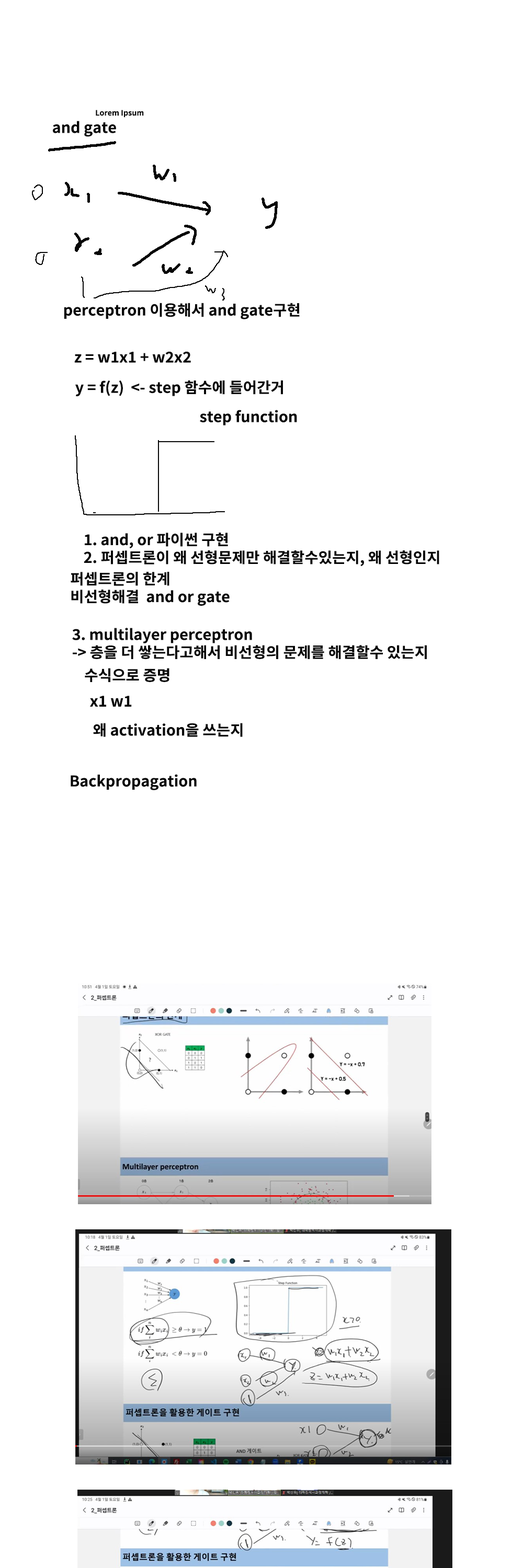
<style>
.page{position:relative;width:523px;height:1568px;background:#ffffff}
.page>*{position:absolute;margin:0}
.t1{font:7.4px "NotoSansCJKkr-Bold";color:#070707}
.t2{font:14.8px "NotoSansCJKkr-Bold";color:#070707}
</style>
<div class="page">
<p class="t1" style="left:96px;top:110px;width:48px;height:8px">Lorem Ipsum</p>
<p class="t2" style="left:53px;top:121px;width:63px;height:16px">and gate</p>
<p class="t2" style="left:64px;top:303px;width:235px;height:16px">perceptron 이용해서 and gate구현</p>
<p class="t2" style="left:74px;top:351px;width:117px;height:12px">z = w1x1 + w2x2</p>
<p class="t2" style="left:75px;top:380px;width:208px;height:17px">y = f(z)  &lt;- step 함수에 들어간거</p>
<p class="t2" style="left:200px;top:410px;width:97px;height:15px">step function</p>
<p class="t2" style="left:84px;top:533px;width:355px;height:34px">1. and, or 파이썬 구현<br>2. 퍼셉트론이 왜 선형문제만 해결할수있는지, 왜 선형인지</p>
<p class="t2" style="left:71px;top:572px;width:158px;height:34px">퍼셉트론의 한계<br>비선형해결  and or gate</p>
<p class="t2" style="left:72px;top:628px;width:354px;height:31px">3. multilayer perceptron <br>-&gt; 층을 더 쌓는다고해서 비선형의 문제를 해결할수 있는지</p>
<p class="t2" style="left:85px;top:668px;width:84px;height:14px">수식으로 증명</p>
<p class="t2" style="left:90px;top:696px;width:42px;height:11px">x1 w1</p>
<p class="t2" style="left:93px;top:723px;width:150px;height:14px">왜 activation을 쓰는지</p>
<p class="t2" style="left:71px;top:774px;width:126px;height:16px">Backpropagation</p>
</div>
